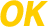
<style>
.page{position:relative;width:48px;height:28px;background:#ffffff}
.page>*{position:absolute;margin:0}
.t1{font:32px "RodinPro-EB";letter-spacing:-0.046em;color:#fecd00;font-style:italic}
</style>
<div class="page">
<p class="t1" style="left:0px;top:0px;width:48px;height:27px">OK</p>
</div>
